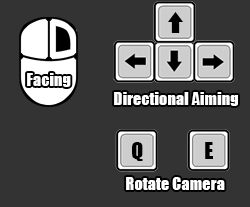
<style>
.page{position:relative;width:250px;height:207px;background:#333333}
.page>*{position:absolute;margin:0}
.t1{font:16.4px "Impact";color:#ffffff}
.t2{font:22px "Impact";color:#000000}
</style>
<div class="page">
<p class="t1" style="left:27px;top:73px;width:44px;height:14px">Facing</p>
<p class="t1" style="left:114px;top:92px;width:124px;height:14px">Directional Aiming</p>
<p class="t2" style="left:132px;top:142px;width:11px;height:19px">Q</p>
<p class="t2" style="left:205px;top:142px;width:8px;height:17px">E</p>
<p class="t1" style="left:126px;top:177px;width:99px;height:13px">Rotate Camera</p>
</div>
